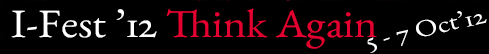
<style>
.page{position:relative;width:489px;height:54px;background:#000000}
.page>*{position:absolute;margin:0}
.t1{font:40.3px "EBGaramond";color:#e40030;scale:1.1 1}
.t2{font:40.3px "EBGaramond";color:#ffffff;scale:1.1 1}
.t3{font:24px "EBGaramond";color:#ffffff;scale:1.24 1}
</style>
<div class="page">
<p class="t1" style="left:11px;top:8px;width:366px;height:41px"><span class="t2">I-Fest ’12 </span>Think Again</p>
<p class="t3" style="left:367px;top:11px;width:120px;height:42px;rotate:-12deg">5 - 7 Oct’12</p>
</div>
